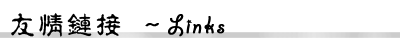
<style>
.page{position:relative;width:400px;height:50px;background:#ffffff}
.page>*{position:absolute;margin:0}
.t1{font:27px "GiddyupStd";letter-spacing:0.06em;color:#000000;font-weight:bold}
.t2{font:27px "¾­µä·±µ­¹Å Regular";letter-spacing:0.06em;color:#000000}
.t3{font:27px "¾­µä·±µ­¹Å Regular";letter-spacing:0.06em;color:#000000;font-weight:bold}
</style>
<div class="page">
<p class="t1" style="left:11px;top:13px;width:214px;height:24px"><span class="t2">友情链接 </span><span class="t3">～</span>Links</p>
</div>
